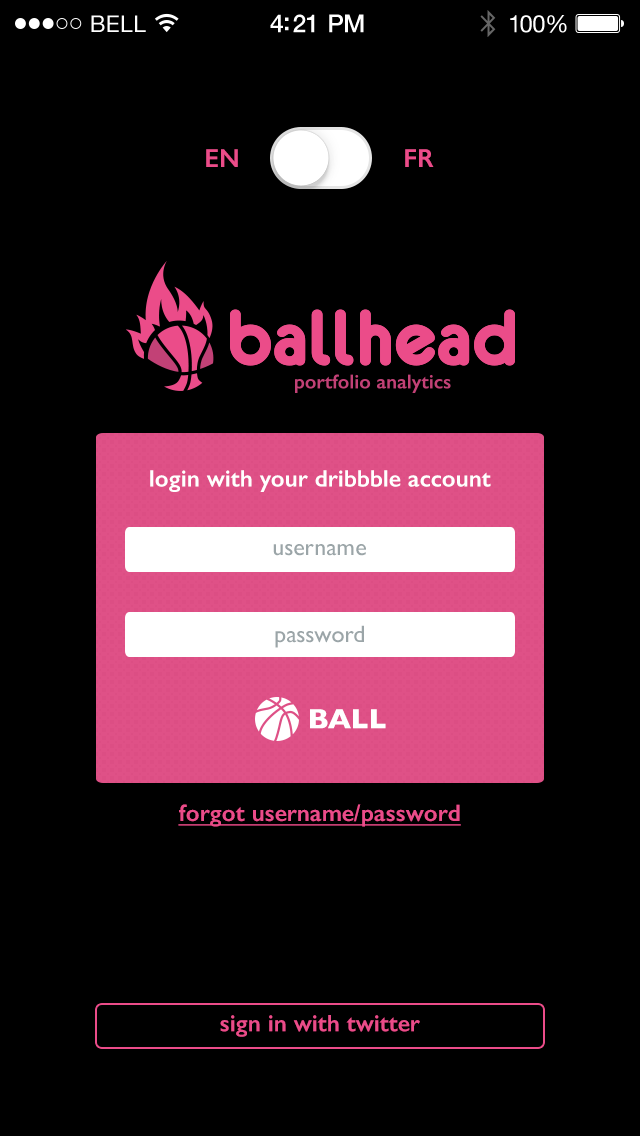
<style>
.page{position:relative;width:640px;height:1136px;background:#000000}
.page>*{position:absolute;margin:0}
.t1{font:26px "GillSans-SemiBold";color:#eb4c89}
.t2{font:24px "GillSans-SemiBold";color:#ffffff}
.t3{font:24px "GillSans";color:#9ba5a8}
.t4{font:28px "GillSans-Bold";color:#ffffff}
.t5{font:24px "GillSans-SemiBold";color:#eb4c89;text-decoration:underline}
.t6{font:24px "GillSans-SemiBold";color:#eb4c89}
</style>
<div class="page">
<p class="t1" style="left:206px;top:149px;width:32px;height:18px">EN</p>
<p class="t1" style="left:405px;top:149px;width:29px;height:18px">FR</p>
<p class="t2" style="left:150px;top:470px;width:341px;height:22px">login with your dribbble account</p>
<p class="t3" style="left:273px;top:544px;width:93px;height:12px">username</p>
<p class="t3" style="left:275px;top:625px;width:89px;height:23px">password</p>
<p class="t4" style="left:310px;top:709px;width:76px;height:20px">BALL</p>
<p class="t5" style="left:178px;top:804px;width:283px;height:23px">forgot username/password</p>
<p class="t6" style="left:220px;top:1015px;width:200px;height:22px">sign in with twitter</p>
</div>
